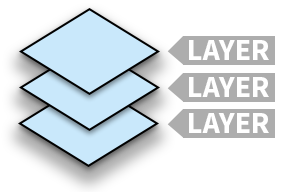
<style>
.page{position:relative;width:284px;height:192px;background:#ffffff}
.page>*{position:absolute;margin:0}
.t1{font:30px "SourceSansPro-Bold";color:#ffffff}
</style>
<div class="page">
<p class="t1" style="left:189px;top:40px;width:80px;height:20px">LAYER</p>
<p class="t1" style="left:189px;top:77px;width:80px;height:20px">LAYER</p>
<p class="t1" style="left:189px;top:113px;width:80px;height:20px">LAYER</p>
</div>
